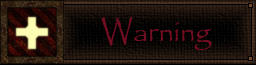
<style>
.page{position:relative;width:256px;height:65px}
.page>*{position:absolute;margin:0}
.t1{font:30px "Papyrus-Regular";color:#740e23}
</style>
<div class="page">
<p class="t1" style="left:101px;top:16px;width:111px;height:34px">Warning</p>
</div>
